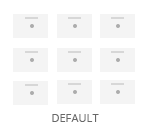
<style>
.page{position:relative;width:150px;height:130px;background:#ffffff}
.page>*{position:absolute;margin:0}
.t1{font:11px "OpenSans";color:#686868;text-transform:uppercase}
</style>
<div class="page">
<p class="t1" style="left:52px;top:114px;width:47px;height:8px">Default</p>
</div>
